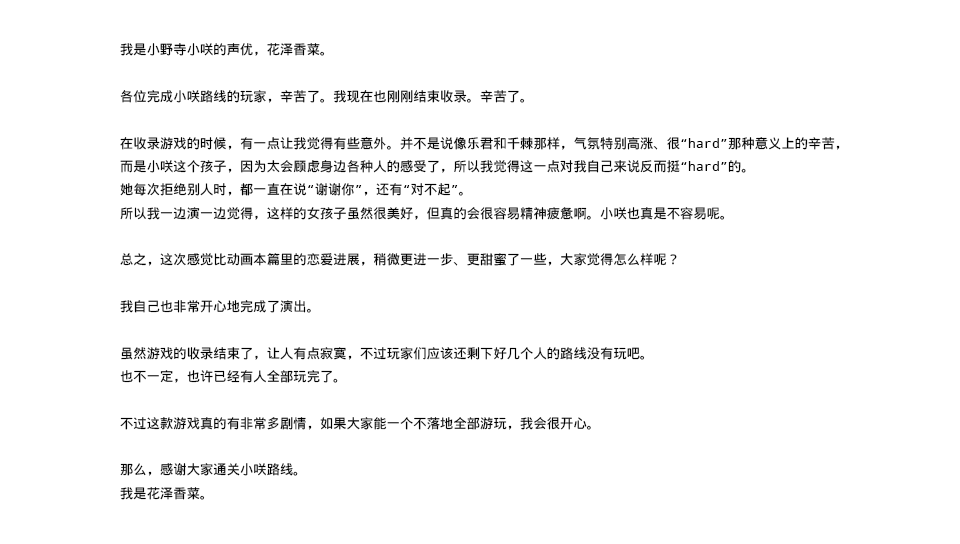
<style>
.page{position:relative;width:960px;height:544px;background:#ffffff}
.page>*{position:absolute;margin:0}
.t1{font:13.3px "WenQuanYiMicroHeiMono";color:#000000}
</style>
<div class="page">
<p class="t1" style="left:120px;top:43px;width:720px;height:457px">我是小野寺小咲的声优，花泽香菜。<br><br>各位完成小咲路线的玩家，辛苦了。我现在也刚刚结束收录。辛苦了。<br><br>在收录游戏的时候，有一点让我觉得有些意外。并不是说像乐君和千棘那样，气氛特别高涨、很“hard”那种意义上的辛苦，<br>而是小咲这个孩子，因为太会顾虑身边各种人的感受了，所以我觉得这一点对我自己来说反而挺“hard”的。<br>她每次拒绝别人时，都一直在说“谢谢你”，还有“对不起”。<br>所以我一边演一边觉得，这样的女孩子虽然很美好，但真的会很容易精神疲惫啊。小咲也真是不容易呢。<br><br>总之，这次感觉比动画本篇里的恋爱进展，稍微更进一步、更甜蜜了一些，大家觉得怎么样呢？<br><br>我自己也非常开心地完成了演出。<br><br>虽然游戏的收录结束了，让人有点寂寞，不过玩家们应该还剩下好几个人的路线没有玩吧。<br>也不一定，也许已经有人全部玩完了。<br><br>不过这款游戏真的有非常多剧情，如果大家能一个不落地全部游玩，我会很开心。<br><br>那么，感谢大家通关小咲路线。<br>我是花泽香菜。</p>
</div>
